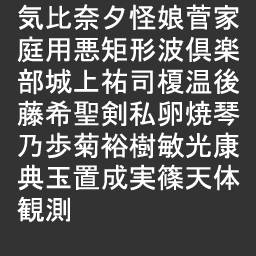
<style>
.page{position:relative;width:256px;height:256px;background:#333333}
.page>*{position:absolute;margin:0}
.t1{font:28px "MS-Gothic";color:#ffffff}
</style>
<div class="page">
<p class="t1" style="left:17px;top:4px;width:223px;height:219px">気比奈夕怪娘菅家<br>庭用悪矩形波倶楽<br>部城上祐司榎温後<br>藤希聖剣私卵焼琴<br>乃歩菊裕樹敏光康<br>典玉置成実篠天体<br>観測</p>
</div>
